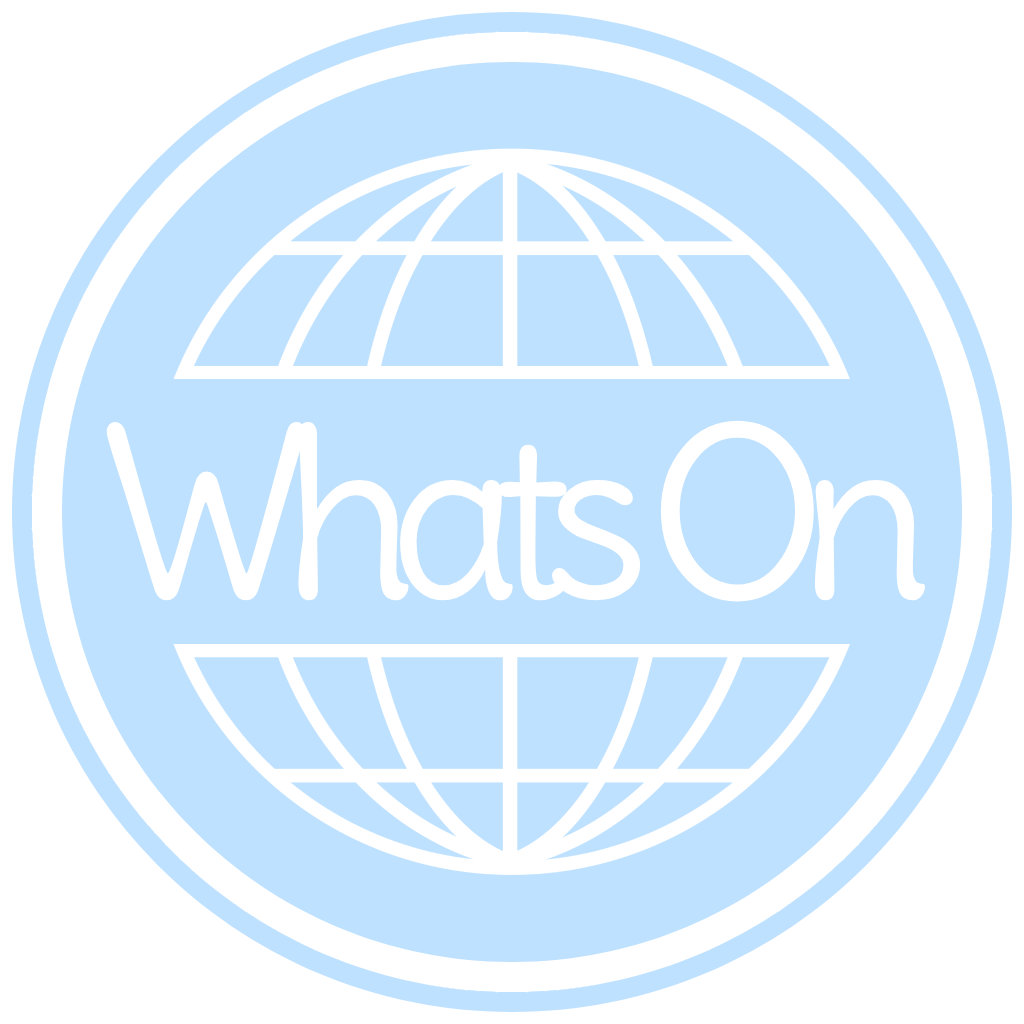
<style>
.page{position:relative;width:1024px;height:1024px;background:#bee1ff}
.page>*{position:absolute;margin:0}
.t1{font:231.6px "Delius-Regular";letter-spacing:-0.12em;color:#ffffff}
</style>
<div class="page">
<p class="t1" style="left:106px;top:420px;width:819px;height:182px">Whats   On</p>
</div>
